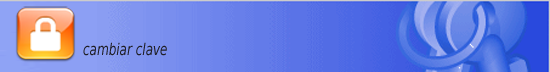
<style>
.page{position:relative;width:550px;height:72px}
.page>*{position:absolute;margin:0}
.t1{font:16.2px "DejaVuSans-Oblique";color:#1f1f26;scale:0.74 1}
</style>
<div class="page">
<p class="t1" style="left:83px;top:42px;width:84px;height:14px">cambiar clave</p>
</div>
